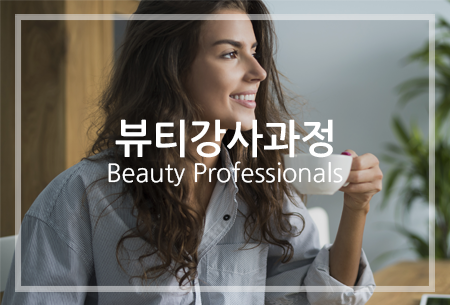
<style>
.page{position:relative;width:450px;height:305px}
.page>*{position:absolute;margin:0}
.t1{font:39.5px "NanumGothicBold";color:#ffffff}
.t2{font:25.3px "NanumGothic";color:#ffffff}
</style>
<div class="page">
<p class="t1" style="left:115px;top:119px;width:218px;height:39px">뷰티강사과정</p>
<p class="t2" style="left:108px;top:161px;width:235px;height:26px">Beauty Professionals</p>
</div>
